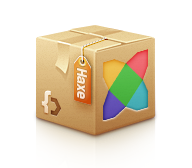
<style>
.page{position:relative;width:192px;height:168px;background:#ffffff}
.page>*{position:absolute;margin:0}
.t1{font:16px "BreuerText-Bold";letter-spacing:-0.01em;color:#faeadb;scale:0.96 1}
</style>
<div class="page">
<p class="t1" style="left:77px;top:68px;width:10px;height:31px;rotate:90deg">Haxe</p>
</div>
